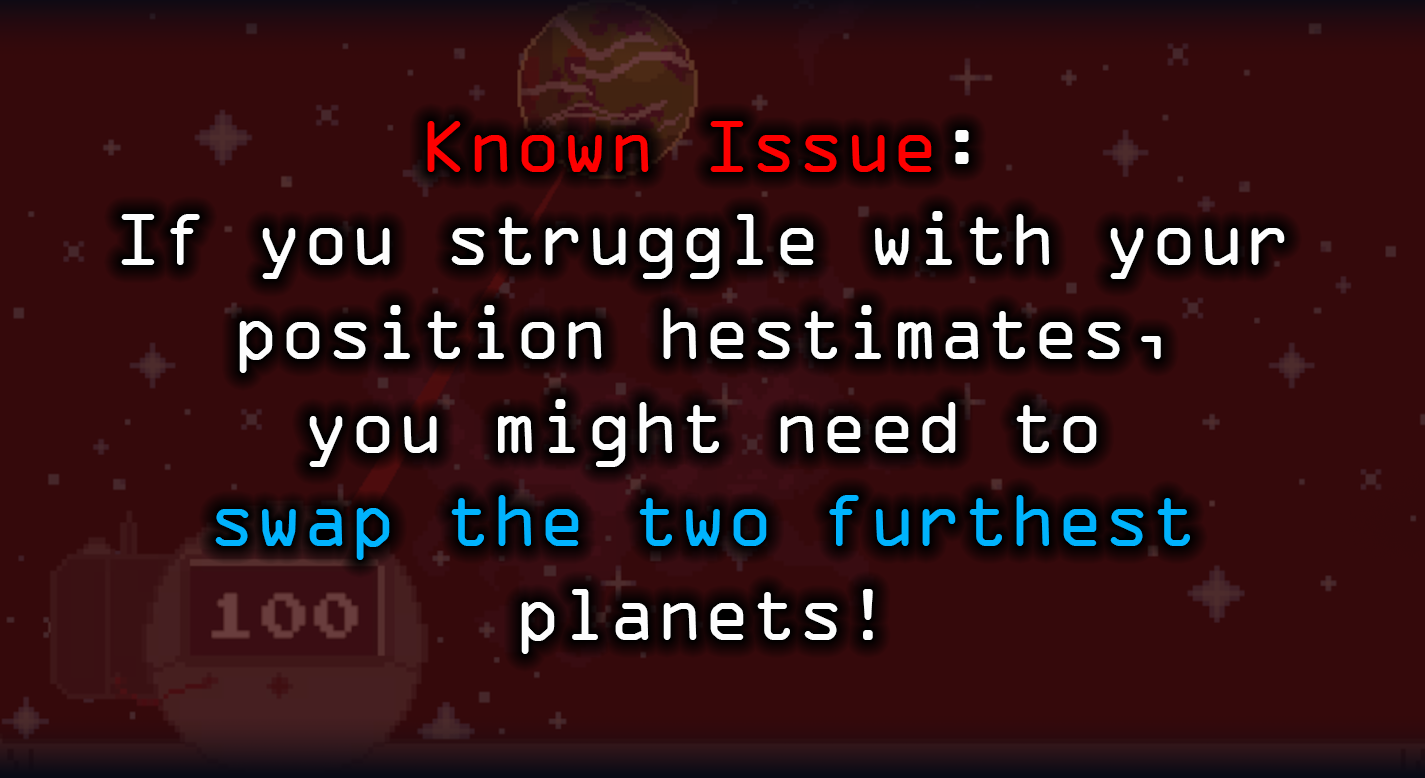
<style>
.page{position:relative;width:1425px;height:778px;background:#35090b}
.page>*{position:absolute;margin:0}
.t1{font:78px "OCRAExtended";color:#ffffff}
.t2{font:78px "OCRAExtended";color:#ff0000}
.t3{font:78px "OCRAExtended";color:#00b4ff}
</style>
<div class="page">
<p class="t1" style="left:121px;top:121px;width:1164px;height:533px;text-align:center"><span class="t2">Known Issue</span>: <br>If you struggle with your position hestimates, <br>you might need to <br><span class="t3">swap the two furthest</span> planets!</p>
</div>
